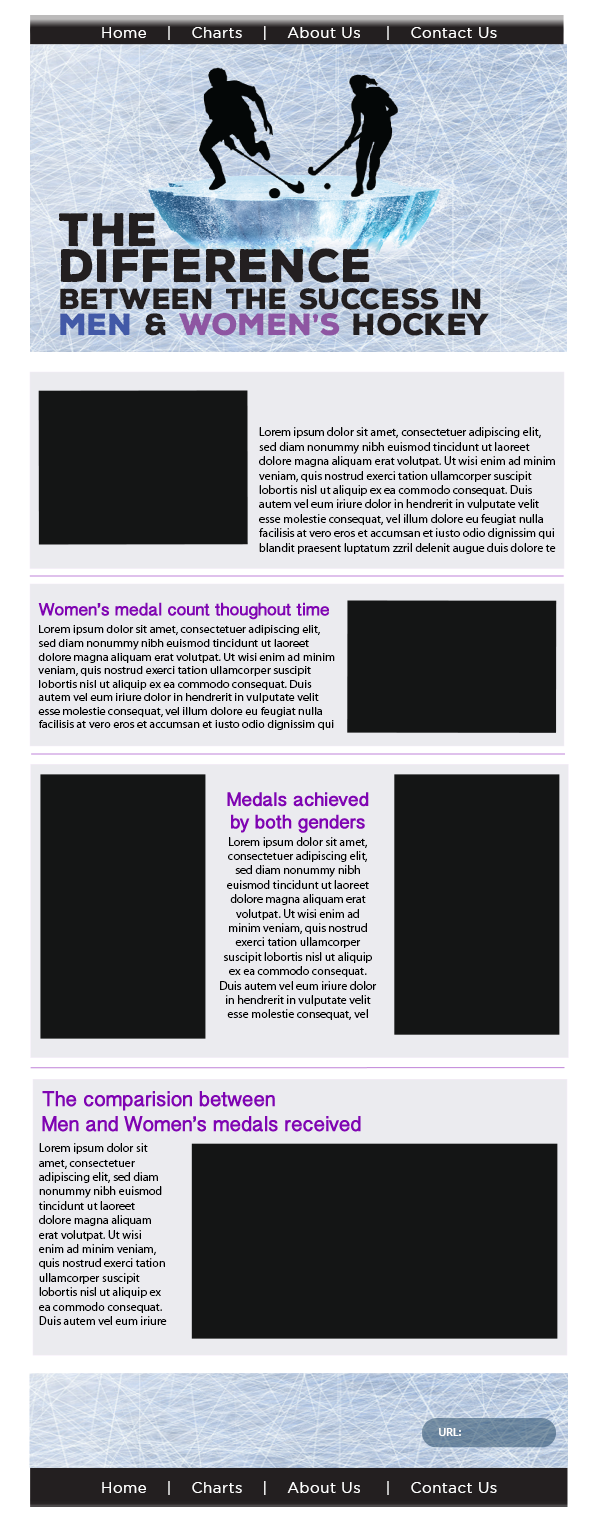
<style>
.page{position:relative;width:596px;height:1521px;background:#141515}
.page>*{position:absolute;margin:0}
.t1{font:15.2px "GothamBook";letter-spacing:0.025em;color:#ffffff}
.t2{font:28.2px/26.7px "NexaRustSans-Black";color:#231f20}
.t3{font:45.5px/36.1px "NexaRustSans-Black";color:#231f20}
.t4{font:29.8px/26.7px "NexaRustSans-Black";color:#4259a7}
.t5{font:29.8px/26.7px "NexaRustSans-Black";color:#231f20}
.t6{font:29.8px/26.7px "NexaRustSans-Black";color:#8e56a2}
.t7{font:12px "MyriadPro-Regular";color:#000000}
.t8{font:11.3px "MyriadPro-Regular";color:#000000;scale:1.06 1}
.t9{font:10.5px "OpenSans-Semibold";color:#ffffff}
</style>
<div class="page">
<p class="t1" style="left:102px;top:26px;width:395px;height:14px">Home    |    Charts    |    About Us     |    Contact Us</p>
<p class="t2" style="left:59px;top:213px;width:430px;height:123px"><span class="t3">the   <br>difference <br></span>between the success in <br><span class="t4">men</span><span class="t5"> &amp; </span><span class="t6">women’s</span><span class="t5"> hockey</span></p>
<p class="t7" style="left:259px;top:427px;width:297px;height:127px">Lorem ipsum dolor sit amet, consectetuer adipiscing elit, sed diam nonummy nibh euismod tincidunt ut laoreet dolore magna aliquam erat volutpat. Ut wisi enim ad minim veniam, quis nostrud exerci tation ullamcorper suscipit lobortis nisl ut aliquip ex ea commodo consequat. Duis autem vel eum iriure dolor in hendrerit in vulputate velit esse molestie consequat, vel illum dolore eu feugiat nulla facilisis at vero eros et accumsan et iusto odio dignissim qui blandit praesent luptatum zzril delenit augue duis dolore te</p>
<p class="t8" style="left:38px;top:625px;width:297px;height:105px">Lorem ipsum dolor sit amet, consectetuer adipiscing elit, sed diam nonummy nibh euismod tincidunt ut laoreet dolore magna aliquam erat volutpat. Ut wisi enim ad minim veniam, quis nostrud exerci tation ullamcorper suscipit lobortis nisl ut aliquip ex ea commodo consequat. Duis autem vel eum iriure dolor in hendrerit in vulputate velit esse molestie consequat, vel illum dolore eu feugiat nulla facilisis at vero eros et accumsan et iusto odio dignissim qui blandit praesent luptatum zzril delenit augue duis dolore te</p>
<p class="t7" style="left:220px;top:837px;width:157px;height:183px;text-align:center">Lorem ipsum dolor sit amet, consectetuer adipiscing elit, sed diam nonummy nibh euismod tincidunt ut laoreet dolore magna aliquam erat volutpat. Ut wisi enim ad minim veniam, quis nostrud exerci tation ullamcorper suscipit lobortis nisl ut aliquip ex ea commodo consequat. Duis autem vel eum iriure dolor in hendrerit in vulputate velit esse molestie consequat, vel</p>
<p class="t7" style="left:38px;top:1143px;width:129px;height:182px">Lorem ipsum dolor sit amet, consectetuer adipiscing elit, sed diam nonummy nibh euismod tincidunt ut laoreet dolore magna aliquam erat volutpat. Ut wisi enim ad minim veniam, quis nostrud exerci tation ullamcorper suscipit lobortis nisl ut aliquip ex ea commodo consequat. Duis autem vel eum iriure dolor in hendrerit in</p>
<p class="t9" style="left:439px;top:1428px;width:22px;height:8px">URL:</p>
<p class="t1" style="left:102px;top:1481px;width:395px;height:14px">Home    |    Charts    |    About Us     |    Contact Us</p>
</div>
